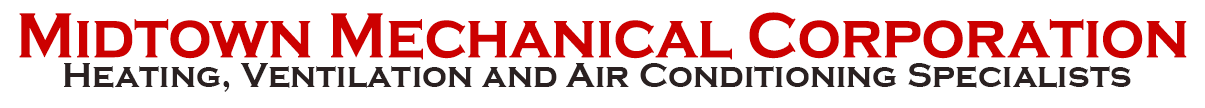
<style>
.page{position:relative;width:1205px;height:108px;background:#ffffff}
.page>*{position:absolute;margin:0}
.t1{font:66px "CopperplateGothic-Bold";letter-spacing:-0.005em;color:#cc0000;scale:0.92 1}
.t2{font:35.9px "CopperplateGothic-Bold";letter-spacing:0.01em;color:#2a2121;scale:0.97 1}
</style>
<div class="page">
<p class="t1" style="left:19px;top:12px;width:1168px;height:48px">Midtown Mechanical Corporation</p>
<p class="t2" style="left:64px;top:63px;width:1067px;height:29px">Heating, Ventilation and Air Conditioning Specialists</p>
</div>
